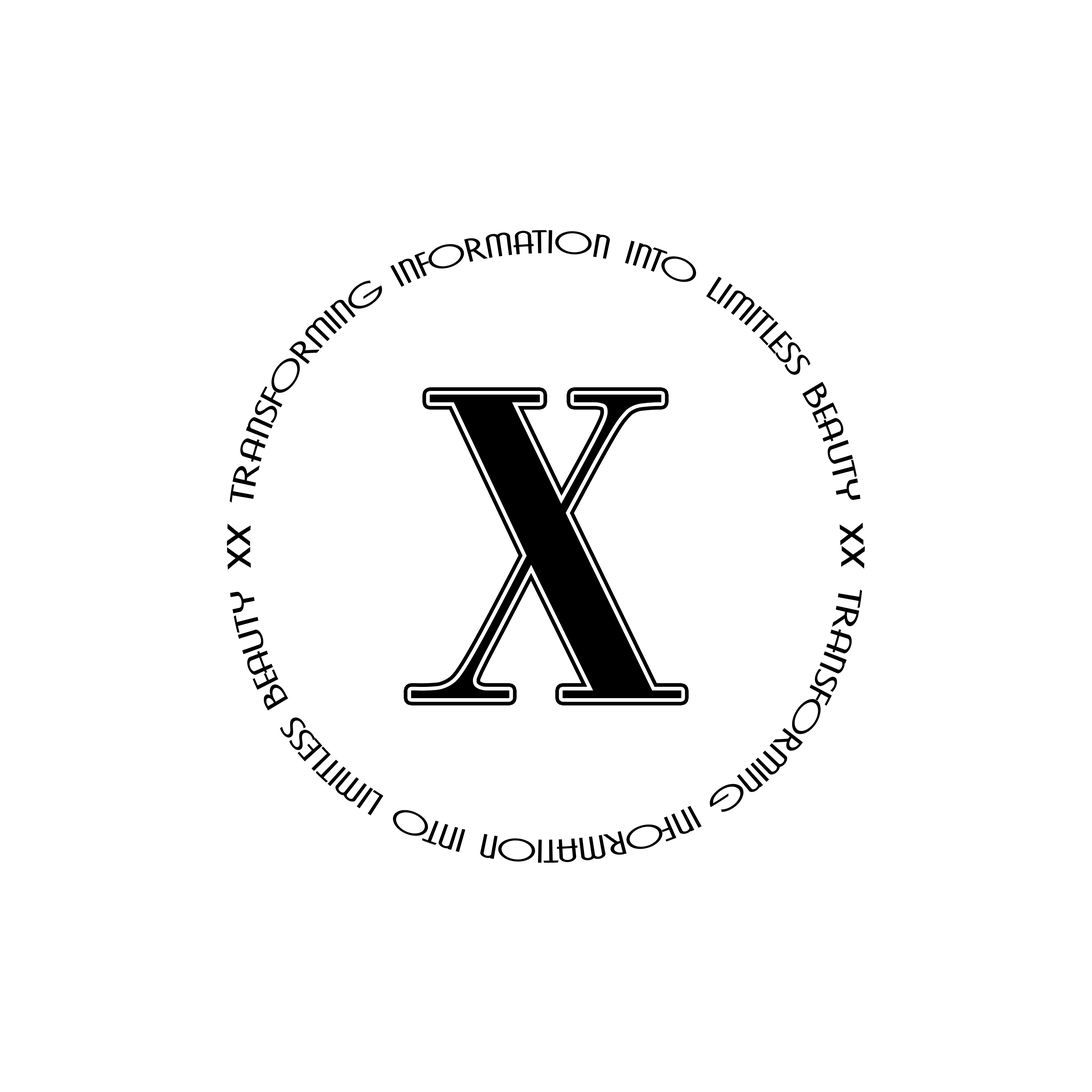
<style>
.page{position:relative;width:1092px;height:1092px;background:#ffffff}
.page>*{position:absolute;margin:0}
.t1{font:33.4px "Cavalier-Regular";color:#000000;text-transform:uppercase}
.t2{font:455px "Vogue-Regular";color:#000000}
.t3{font:33.4px "Cavalier-Regular";color:#000000}
</style>
<div class="page">
<p class="t1" style="left:227px;top:230px;width:636px;height:316px">x Transforming Information into Limitless Beauty x</p>
<p class="t2" style="left:411px;top:395px;width:270px;height:303px">X</p>
<p class="t3" style="left:227px;top:546px;width:638px;height:317px;rotate:180deg">x Transforming Information into Limitless Beauty x</p>
</div>
